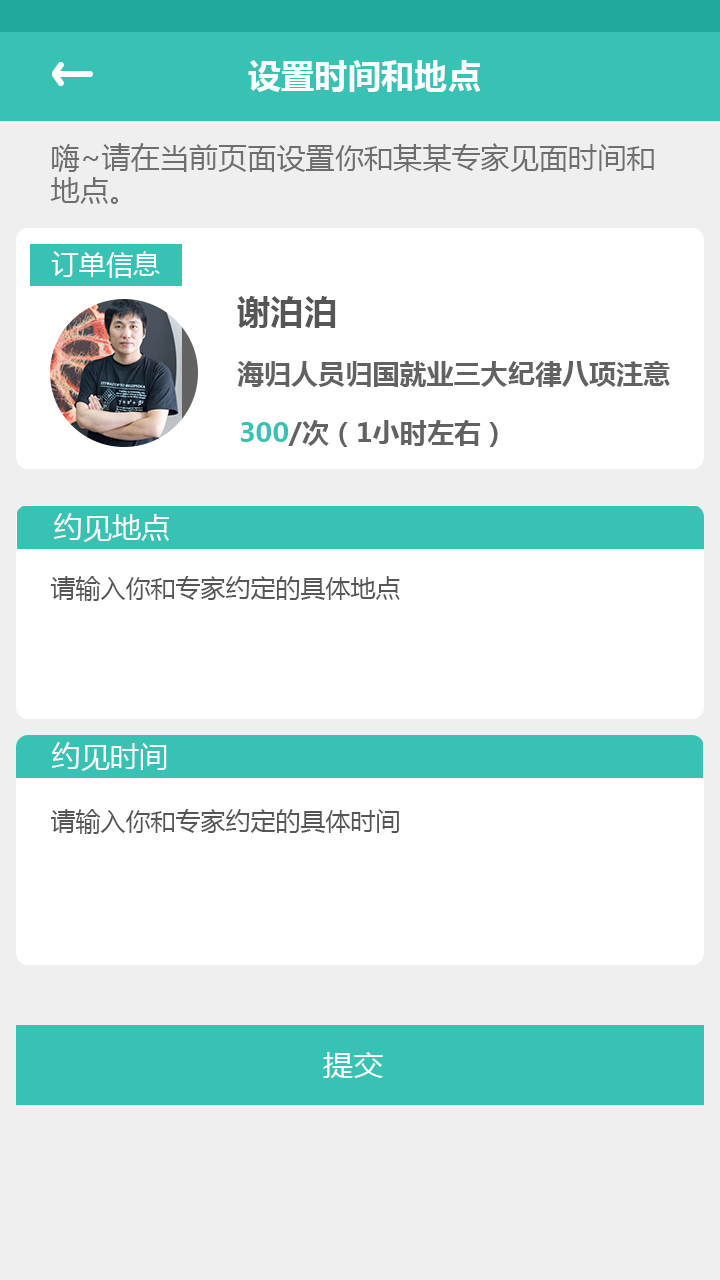
<style>
.page{position:relative;width:720px;height:1280px;background:#ffffff}
.page>*{position:absolute;margin:0}
.t1{font:33.3px "MicrosoftYaHei-Bold";color:#fefefe}
.t2{font:29.2px/33.3px "MicrosoftYaHei";color:#6e6e6e}
.t3{font:27.1px "MicrosoftYaHei";color:#fefefe}
.t4{font:33.3px "MicrosoftYaHei-Bold";color:#565656}
.t5{font:27.1px "MicrosoftYaHei-Bold";color:#626262}
.t6{font:27.1px "MicrosoftYaHei-Bold";color:#38c2b3}
.t7{font:29.2px "MicrosoftYaHei";color:#fefefe}
.t8{font:25px "MicrosoftYaHei";color:#565656}
.t9{font:29.2px "MicrosoftYaHei";color:#fefefe;scale:1.04 1}
</style>
<div class="page">
<p class="t1" style="left:248px;top:60px;width:233px;height:32px">设置时间和地点</p>
<p class="t2" style="left:50px;top:143px;width:604px;height:61px">嗨~请在当前页面设置你和某某专家见面时间和<br>地点。</p>
<p class="t3" style="left:51px;top:251px;width:109px;height:27px">订单信息</p>
<p class="t4" style="left:237px;top:296px;width:99px;height:32px">谢泊泊</p>
<p class="t5" style="left:237px;top:361px;width:433px;height:26px">海归人员归国就业三大纪律八项注意</p>
<p class="t5" style="left:241px;top:420px;width:257px;height:27px"><span class="t6">300</span>/次（1小时左右）</p>
<p class="t7" style="left:54px;top:513px;width:115px;height:29px">约见地点</p>
<p class="t8" style="left:51px;top:576px;width:349px;height:25px">请输入你和专家约定的具体地点</p>
<p class="t7" style="left:52px;top:742px;width:115px;height:29px">约见时间</p>
<p class="t8" style="left:51px;top:809px;width:348px;height:25px">请输入你和专家约定的具体时间</p>
<p class="t9" style="left:323px;top:1052px;width:60px;height:26px">提交</p>
</div>
